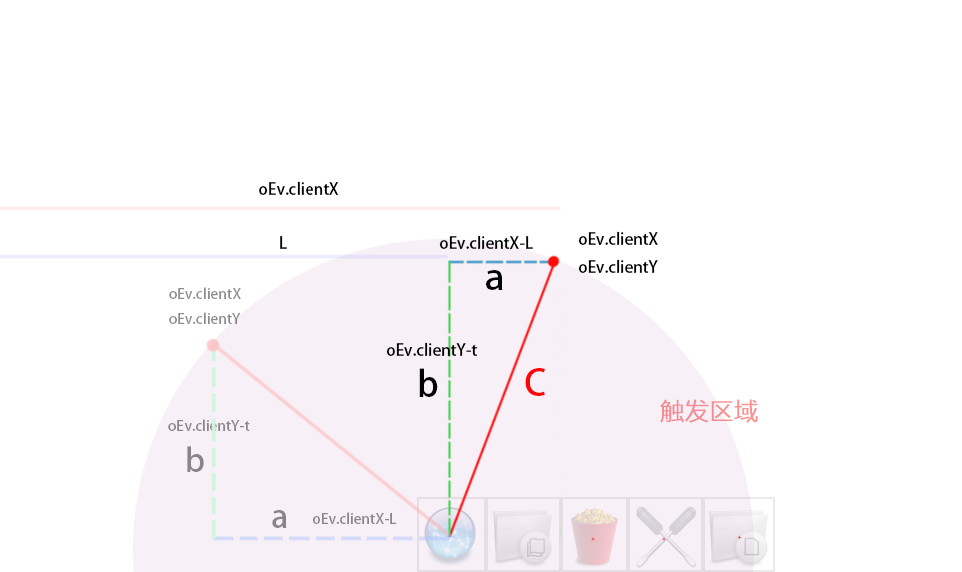
<style>
.page{position:relative;width:962px;height:572px;background:#ffffff}
.page>*{position:absolute;margin:0}
.t1{font:16px "AdobeHeitiStd-Regular";color:#000000}
.t2{font:36px "AdobeHeitiStd-Regular";color:#000000}
.t3{font:14.3px "AdobeHeitiStd-Regular";color:#8c8c8c}
.t4{font:36px "AdobeHeitiStd-Regular";color:#fa0707}
.t5{font:24px "MicrosoftYaHeiLight";color:#f99191;font-weight:bold}
.t6{font:14.3px "AdobeHeitiStd-Regular";color:#888488}
.t7{font:32.2px "AdobeHeitiStd-Regular";color:#888488}
</style>
<div class="page">
<p class="t1" style="left:259px;top:181px;width:80px;height:14px">oEv.clientX</p>
<p class="t1" style="left:578px;top:231px;width:80px;height:42px">oEv.clientX <br>oEv.clientY</p>
<p class="t1" style="left:280px;top:236px;width:7px;height:13px">L</p>
<p class="t1" style="left:439px;top:235px;width:94px;height:14px">oEv.clientX-L</p>
<p class="t2" style="left:486px;top:270px;width:17px;height:20px">a</p>
<p class="t3" style="left:169px;top:287px;width:72px;height:37px">oEv.clientX <br>oEv.clientY</p>
<p class="t1" style="left:386px;top:342px;width:92px;height:14px">oEv.clientY-t</p>
<p class="t2" style="left:419px;top:368px;width:19px;height:29px">b</p>
<p class="t4" style="left:525px;top:368px;width:20px;height:28px">C</p>
<p class="t5" style="left:660px;top:399px;width:98px;height:24px">触发区域</p>
<p class="t6" style="left:168px;top:419px;width:82px;height:12px">oEv.clientY-t</p>
<p class="t7" style="left:187px;top:446px;width:17px;height:26px">b</p>
<p class="t7" style="left:272px;top:510px;width:15px;height:18px">a</p>
<p class="t6" style="left:313px;top:512px;width:84px;height:12px">oEv.clientX-L</p>
</div>
